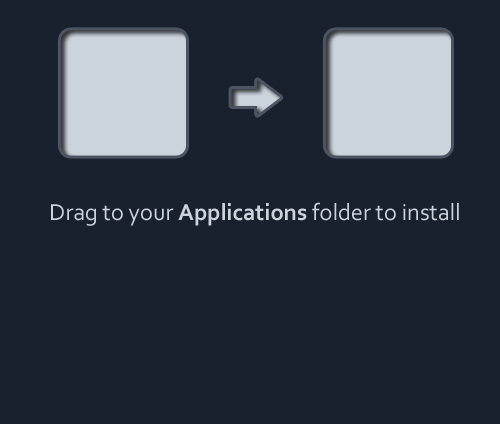
<style>
.page{position:relative;width:500px;height:424px;background:#1a212e}
.page>*{position:absolute;margin:0}
.t1{font:24px "Corbel";color:#cbd3dd}
.t2{font:24px "Corbel-Bold";color:#cbd3dd}
</style>
<div class="page">
<p class="t1" style="left:51px;top:202px;width:408px;height:24px">Drag to your <span class="t2">Applications </span>folder to install</p>
</div>
